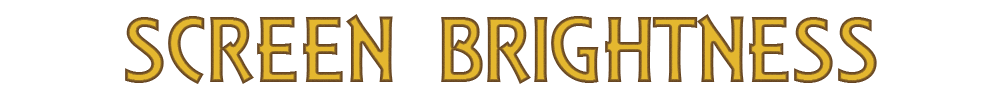
<style>
.page{position:relative;width:1000px;height:100px;background:#ffffff}
.page>*{position:absolute;margin:0}
.t1{font:100px "ARESSENCE"}
</style>
<div class="page">
<p class="t1" style="left:125px;top:14px;width:752px;height:70px">SCREEN BRIGHTNESS</p>
</div>
